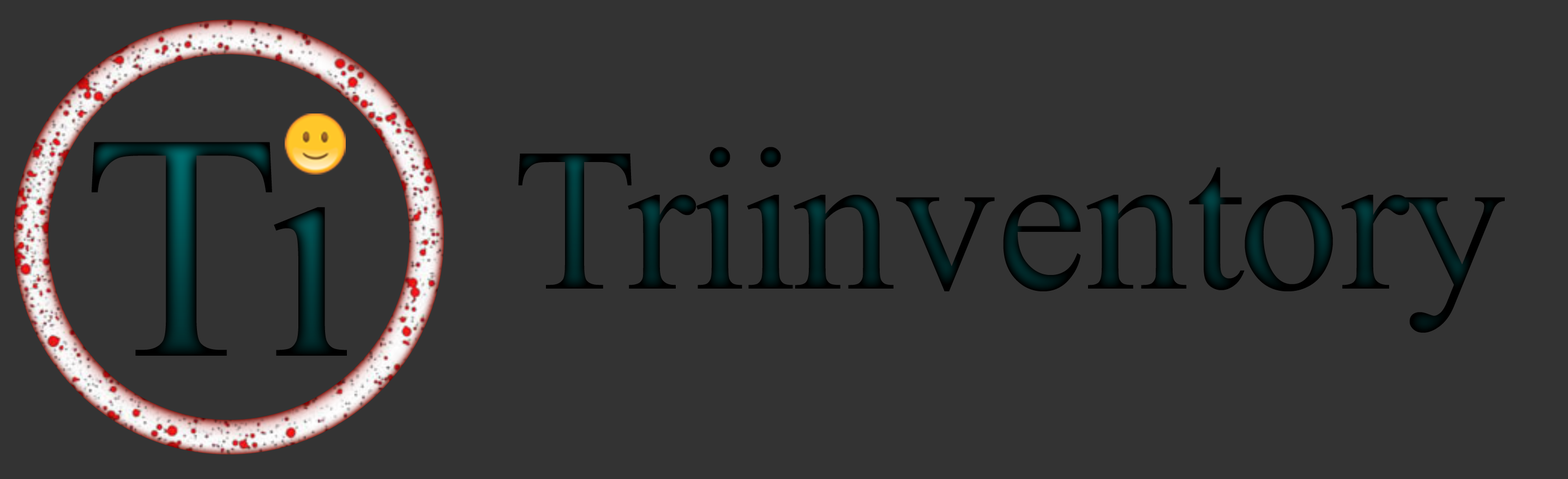
<style>
.page{position:relative;width:1568px;height:479px;background:#333333}
.page>*{position:absolute;margin:0}
.t1{font:322.3px "TimesNewRomanPSMT"}
.t2{font:203.8px "TimesNewRomanPSMT";color:#001414}
</style>
<div class="page">
<p class="t1" style="left:92px;top:131px;width:255px;height:225px">Ti</p>
<p class="t2" style="left:518px;top:147px;width:987px;height:186px">Triinventory</p>
</div>
